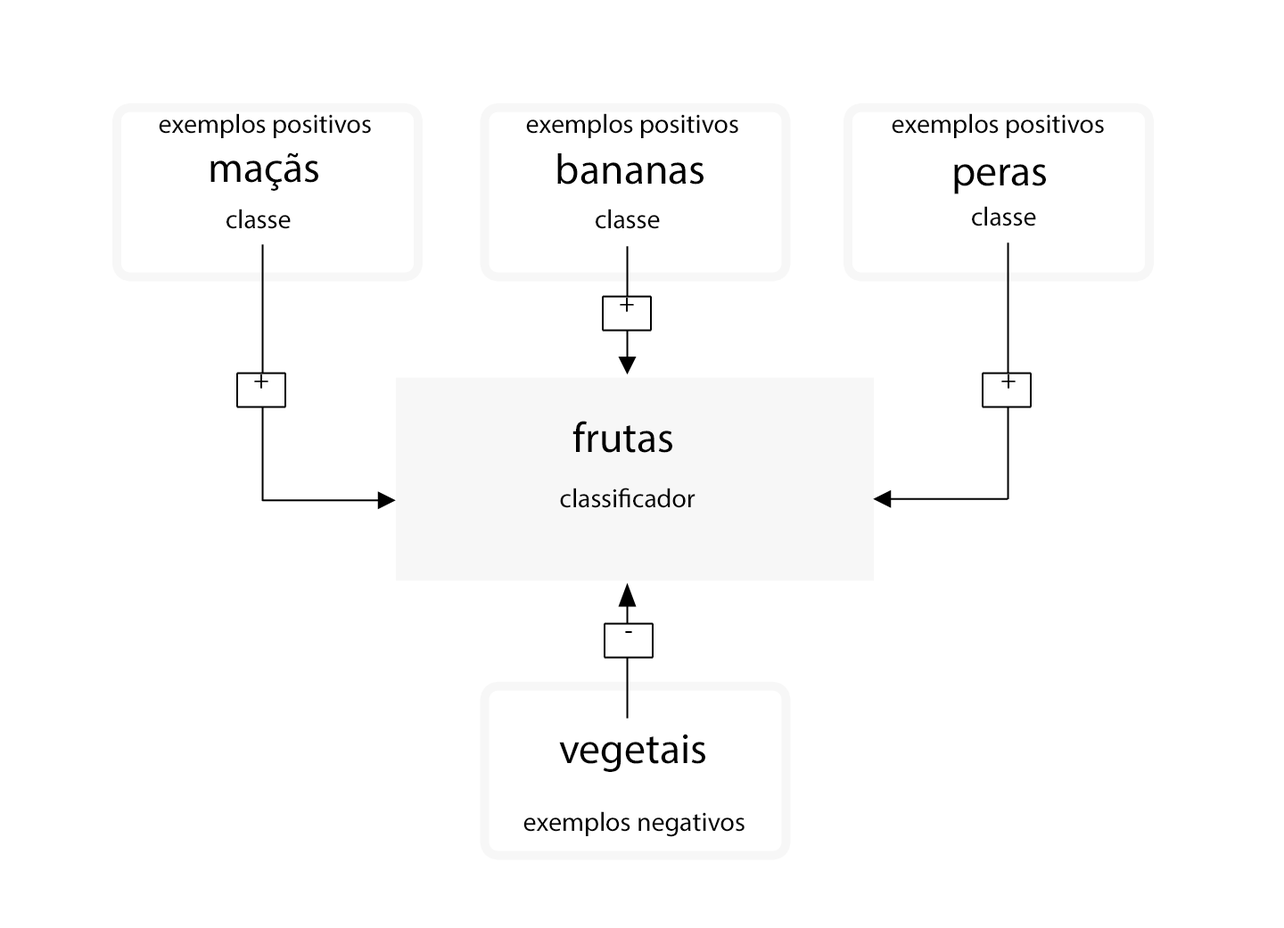
<style>
.page{position:relative;width:1284px;height:928px;background:#ffffff}
.page>*{position:absolute;margin:0}
.t1{font:26.8px "MyriadPro-Regular";color:#000000}
.t2{font:42.8px "MyriadPro-Regular";color:#000000}
</style>
<div class="page">
<p class="t1" style="left:159px;top:113px;width:212px;height:25px">exemplos positivos</p>
<p class="t1" style="left:526px;top:113px;width:212px;height:25px">exemplos positivos</p>
<p class="t1" style="left:892px;top:113px;width:212px;height:25px">exemplos positivos</p>
<p class="t2" style="left:210px;top:153px;width:108px;height:38px">maçãs</p>
<p class="t2" style="left:557px;top:153px;width:147px;height:32px">bananas</p>
<p class="t2" style="left:954px;top:164px;width:92px;height:30px">peras</p>
<p class="t1" style="left:227px;top:209px;width:64px;height:20px">classe</p>
<p class="t1" style="left:596px;top:209px;width:64px;height:20px">classe</p>
<p class="t1" style="left:972px;top:206px;width:64px;height:21px">classe</p>
<p class="t1" style="left:620px;top:298px;width:14px;height:14px">+</p>
<p class="t1" style="left:254px;top:375px;width:14px;height:14px">+</p>
<p class="t1" style="left:1002px;top:375px;width:14px;height:14px">+</p>
<p class="t2" style="left:573px;top:421px;width:99px;height:32px">frutas</p>
<p class="t1" style="left:560px;top:488px;width:136px;height:20px">classificador</p>
<p class="t1" style="left:625px;top:631px;width:7px;height:2px">-</p>
<p class="t2" style="left:559px;top:734px;width:146px;height:38px">vegetais</p>
<p class="t1" style="left:524px;top:812px;width:221px;height:25px">exemplos negativos</p>
</div>
